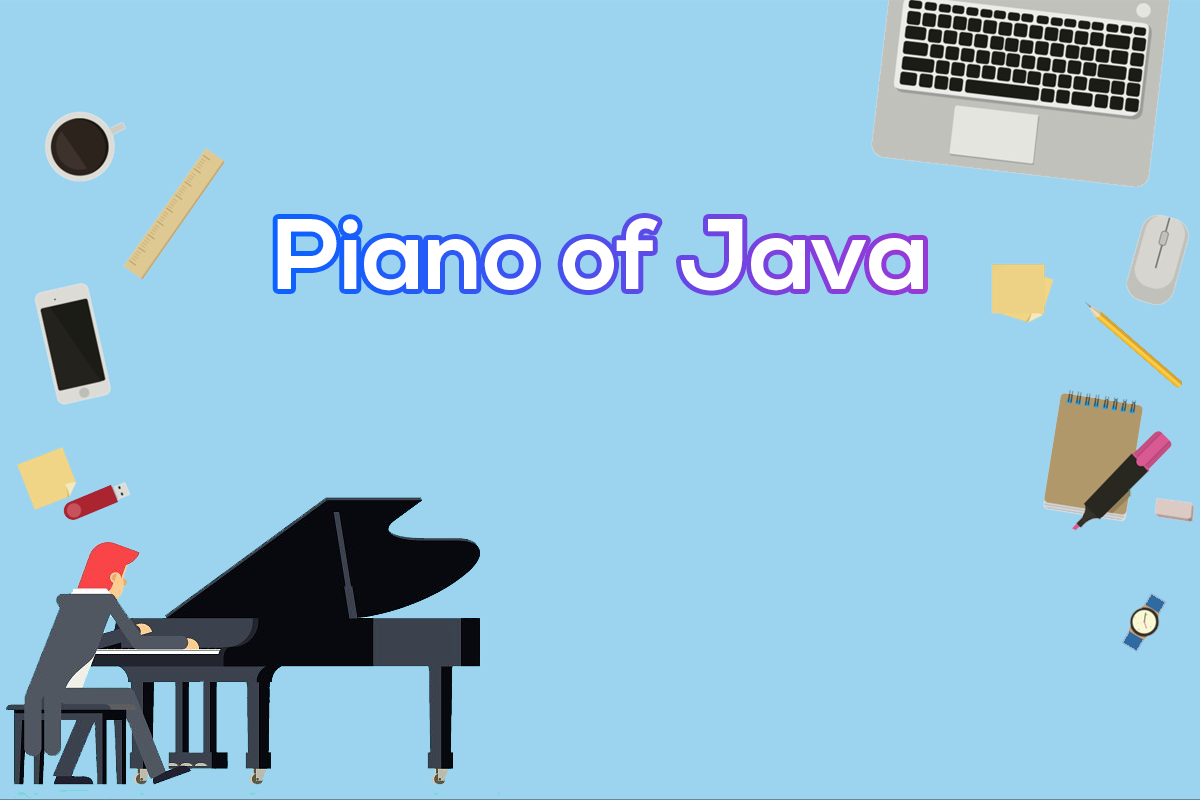
<style>
.page{position:relative;width:1200px;height:800px;background:#9cd4ef}
.page>*{position:absolute;margin:0}
.t1{font:100px "NexaBold";color:#ffffff}
</style>
<div class="page">
<p class="t1" style="left:277px;top:218px;width:646px;height:73px">Piano of Java</p>
</div>
